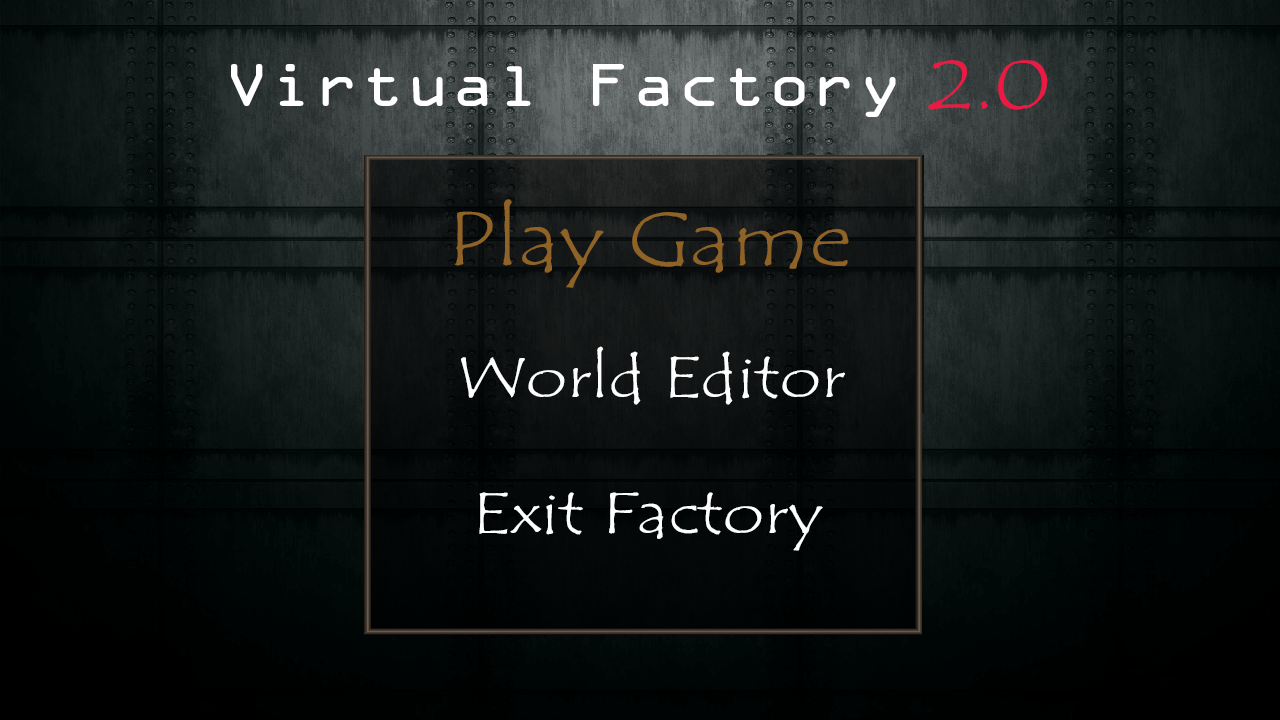
<style>
.page{position:relative;width:1280px;height:720px}
.page>*{position:absolute;margin:0}
.t1{font:54px "OCRAStd";color:#ffffff;scale:1.16 1}
.t2{font:72px "TempusSansITC";color:#ed1944;scale:1.16 1}
.t3{font:78px "TempusSansITC";color:#8f6327;scale:1.16 1}
.t4{font:60px "TempusSansITC";color:#ffffff;scale:1.16 1}
</style>
<div class="page">
<p class="t1" style="left:231px;top:64px;width:665px;height:53px">Virtual Factory</p>
<p class="t2" style="left:928px;top:60px;width:120px;height:50px">2.0</p>
<p class="t3" style="left:454px;top:199px;width:395px;height:89px">Play Game</p>
<p class="t4" style="left:461px;top:346px;width:384px;height:59px">World Editor</p>
<p class="t4" style="left:479px;top:492px;width:344px;height:59px">Exit Factory</p>
</div>
